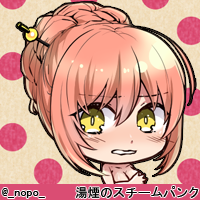
<style>
.page{position:relative;width:200px;height:200px}
.page>*{position:absolute;margin:0}
.t1{font:12.3px "MS-Gothic";color:#000000}
.t2{font:12.5px "MS-Gothic";color:#000000}
</style>
<div class="page">
<p class="t1" style="left:2px;top:188px;width:43px;height:10px">@_nopo_</p>
<p class="t2" style="left:75px;top:186px;width:124px;height:13px">湯煙のスチームパンク</p>
</div>
